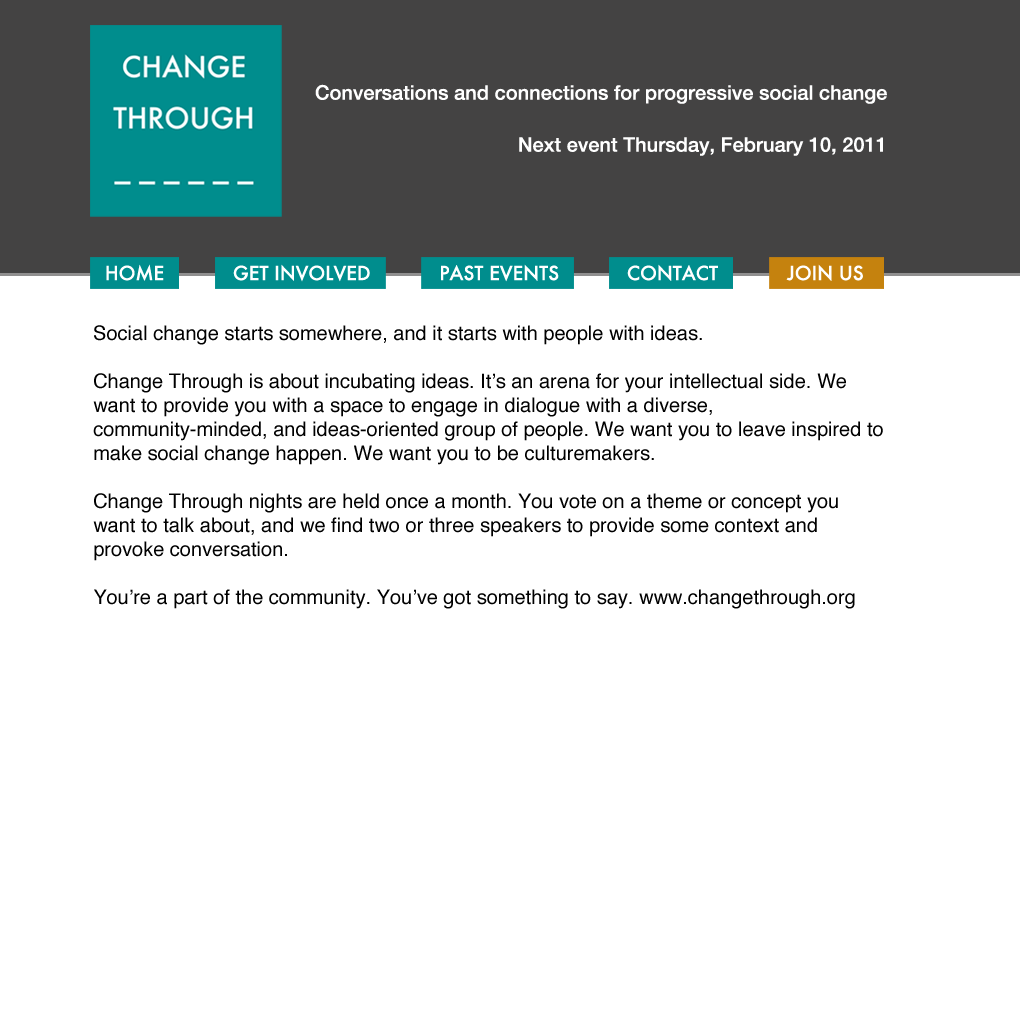
<style>
.page{position:relative;width:1020px;height:1020px;background:#ffffff}
.page>*{position:absolute;margin:0}
.t1{font:20.1px "HelveticaNeue-Medium";color:#ffffff}
.t2{font:18.8px "Futura-Medium";color:#ffffff}
.t3{font:20px "Helvetica";color:#000000}
</style>
<div class="page">
<p class="t1" style="left:315px;top:84px;width:572px;height:20px">Conversations and connections for progressive social change</p>
<p class="t1" style="left:519px;top:137px;width:364px;height:19px">Next event Thursday, February 10, 2011</p>
<p class="t2" style="left:106px;top:264px;width:58px;height:17px">HOME</p>
<p class="t2" style="left:233px;top:264px;width:137px;height:18px">GET INVOLVED</p>
<p class="t2" style="left:441px;top:264px;width:118px;height:18px">PAST EVENTS</p>
<p class="t2" style="left:627px;top:264px;width:91px;height:17px">CONTACT</p>
<p class="t2" style="left:786px;top:264px;width:77px;height:17px">JOIN US</p>
<p class="t3" style="left:93px;top:325px;width:790px;height:284px">Social change starts somewhere, and it starts with people with ideas.<br><br>Change Through is about incubating ideas. It’s an arena for your intellectual side. We want to provide you with a space to engage in dialogue with a diverse, community-minded, and ideas-oriented group of people. We want you to leave inspired to make social change happen. We want you to be culturemakers.<br><br>Change Through nights are held once a month. You vote on a theme or concept you want to talk about, and we find two or three speakers to provide some context and provoke conversation.<br><br>You’re a part of the community. You’ve got something to say. www.changethrough.org</p>
</div>
